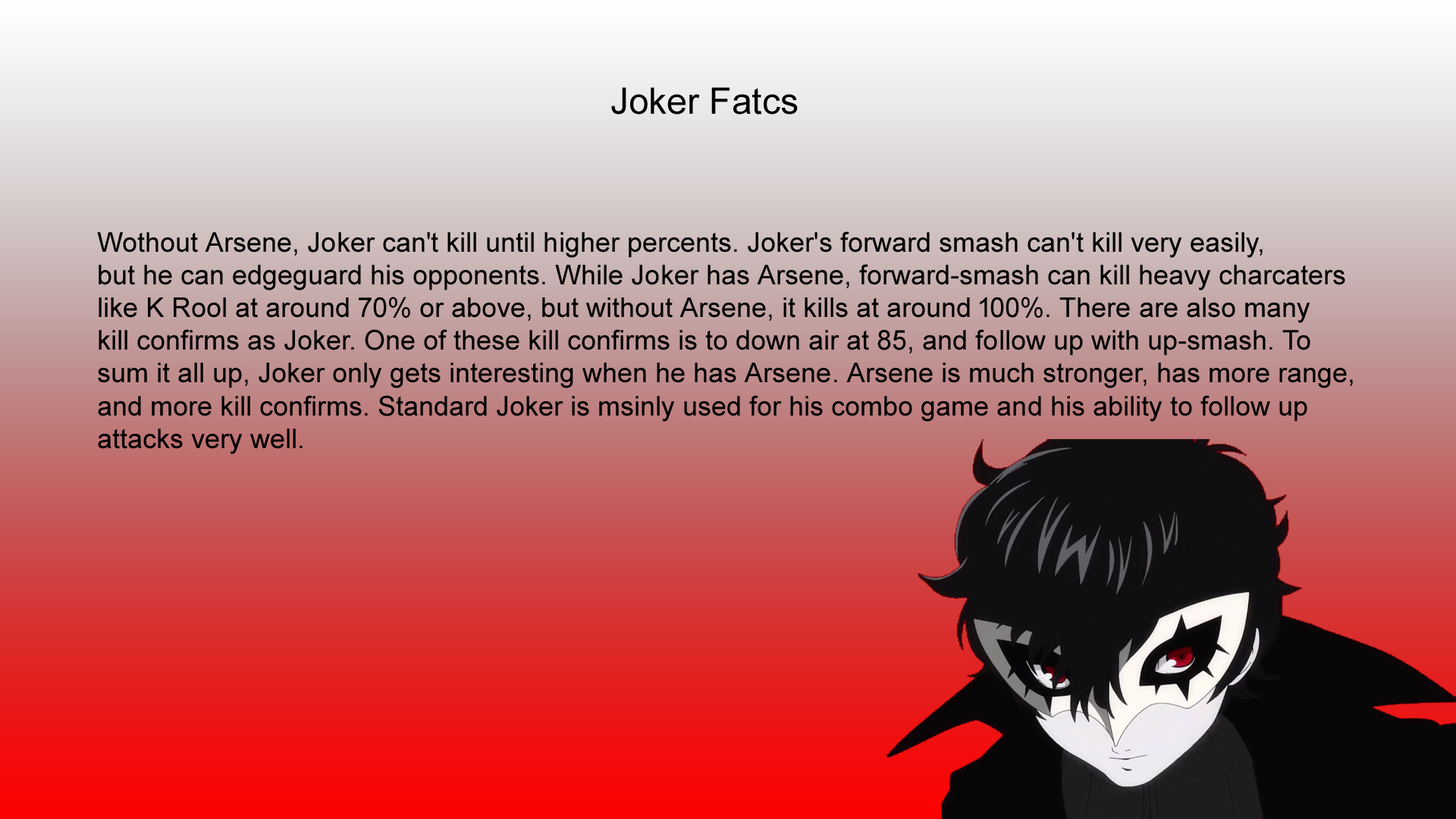
<style>
.page{position:relative;width:1456px;height:819px}
.page>*{position:absolute;margin:0}
.t1{font:36.4px "ArialMT";color:#000000}
.t2{font:27.3px "ArialMT";color:#000000}
</style>
<div class="page">
<p class="t1" style="left:611px;top:87px;width:187px;height:28px">Joker Fatcs</p>
<p class="t2" style="left:97px;top:231px;width:1256px;height:223px">Wothout Arsene, Joker can't kill until higher percents. Joker's forward smash can't kill very easily,<br>but he can edgeguard his opponents. While Joker has Arsene, forward-smash can kill heavy charcaters <br>like K Rool at around 70% or above, but without Arsene, it kills at around 100%. There are also many<br>kill confirms as Joker. One of these kill confirms is to down air at 85, and follow up with up-smash. To <br>sum it all up, Joker only gets interesting when he has Arsene. Arsene is much stronger, has more range,<br>and more kill confirms. Standard Joker is msinly used for his combo game and his ability to follow up<br>attacks very well.</p>
</div>
